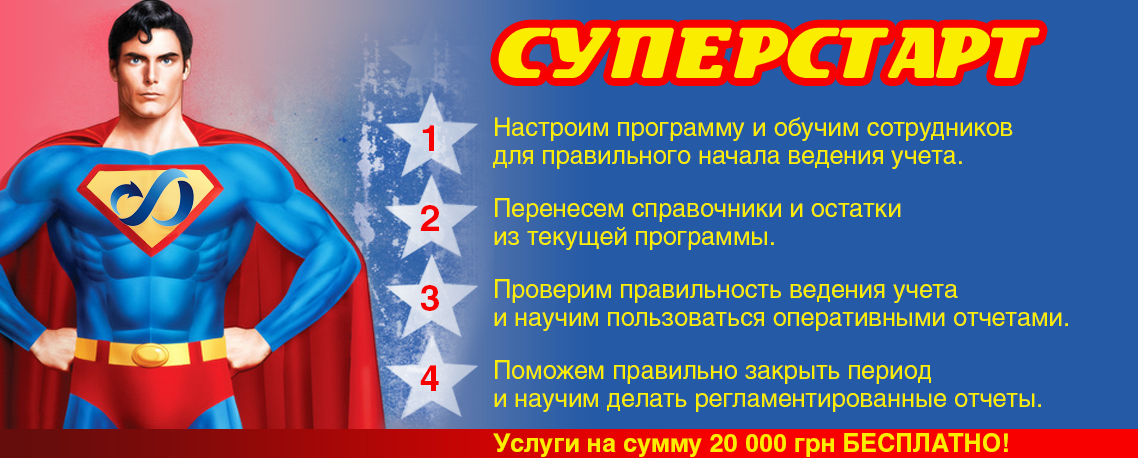
<style>
.page{position:relative;width:1138px;height:458px;background:#245aa6}
.page>*{position:absolute;margin:0}
.t1{font:80px "DSMotionDemo-Italic";color:#faed00}
.t2{font:36px/80px "Helios-Bold";color:#f80000}
.t3{font:25px/28px "Helios";color:#faed00}
.t4{font:25px "Helios-Bold";color:#faed00}
</style>
<div class="page">
<p class="t1" style="left:500px;top:29px;width:538px;height:47px">СУПЕРСТАРТ</p>
<p class="t1" style="left:500px;top:29px;width:538px;height:47px">СУПЕРСТАРТ</p>
<p class="t2" style="left:420px;top:125px;width:19px;height:266px">1<br>2<br>3<br>4</p>
<p class="t3" style="left:493px;top:117px;width:575px;height:295px">Настроим программу и обучим сотрудников<br>для правильного начала ведения учета.<br>Перенесем справочники и остатки<br>из текущей программы.<br>Проверим правильность ведения учета<br>и научим пользоваться оперативными отчетами.<br>Поможем правильно закрыть период<br>и научим делать регламентированные отчеты.</p>
<p class="t4" style="left:493px;top:433px;width:515px;height:24px">Услуги на сумму 20 000 грн БЕСПЛАТНО!</p>
</div>
